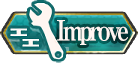
<style>
.page{position:relative;width:138px;height:63px;background:#ffffff}
.page>*{position:absolute;margin:0}
.t1{font:28px "RyuminPro-ExBold";letter-spacing:-0.16em;color:#fff6f2;scale:0.85 1}
</style>
<div class="page">
<p class="t1" style="left:57px;top:20px;width:71px;height:25px">Improve</p>
</div>
